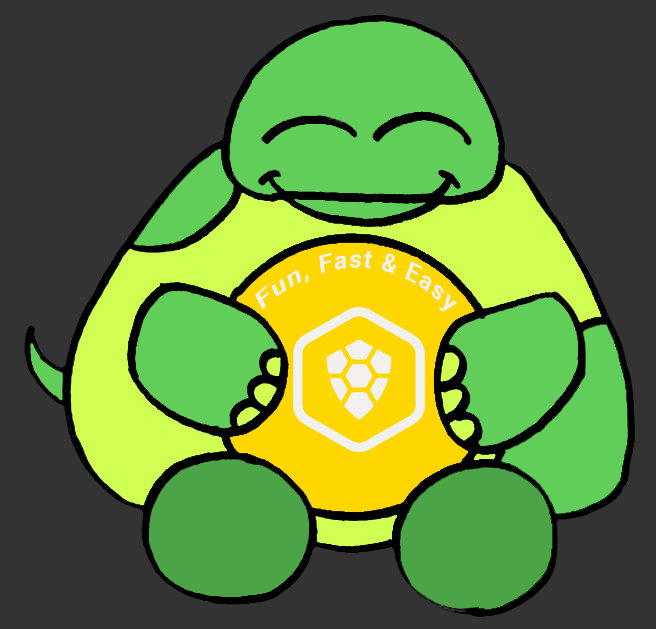
<style>
.page{position:relative;width:656px;height:629px;background:#333333}
.page>*{position:absolute;margin:0}
.t1{font:26px "Roboto-Bold";letter-spacing:0.075em;color:#f2f1f0;scale:0.76 1}
</style>
<div class="page">
<p class="t1" style="left:255px;top:251px;width:202px;height:61px;rotate:12deg">Fun, Fast &amp; Easy</p>
</div>
